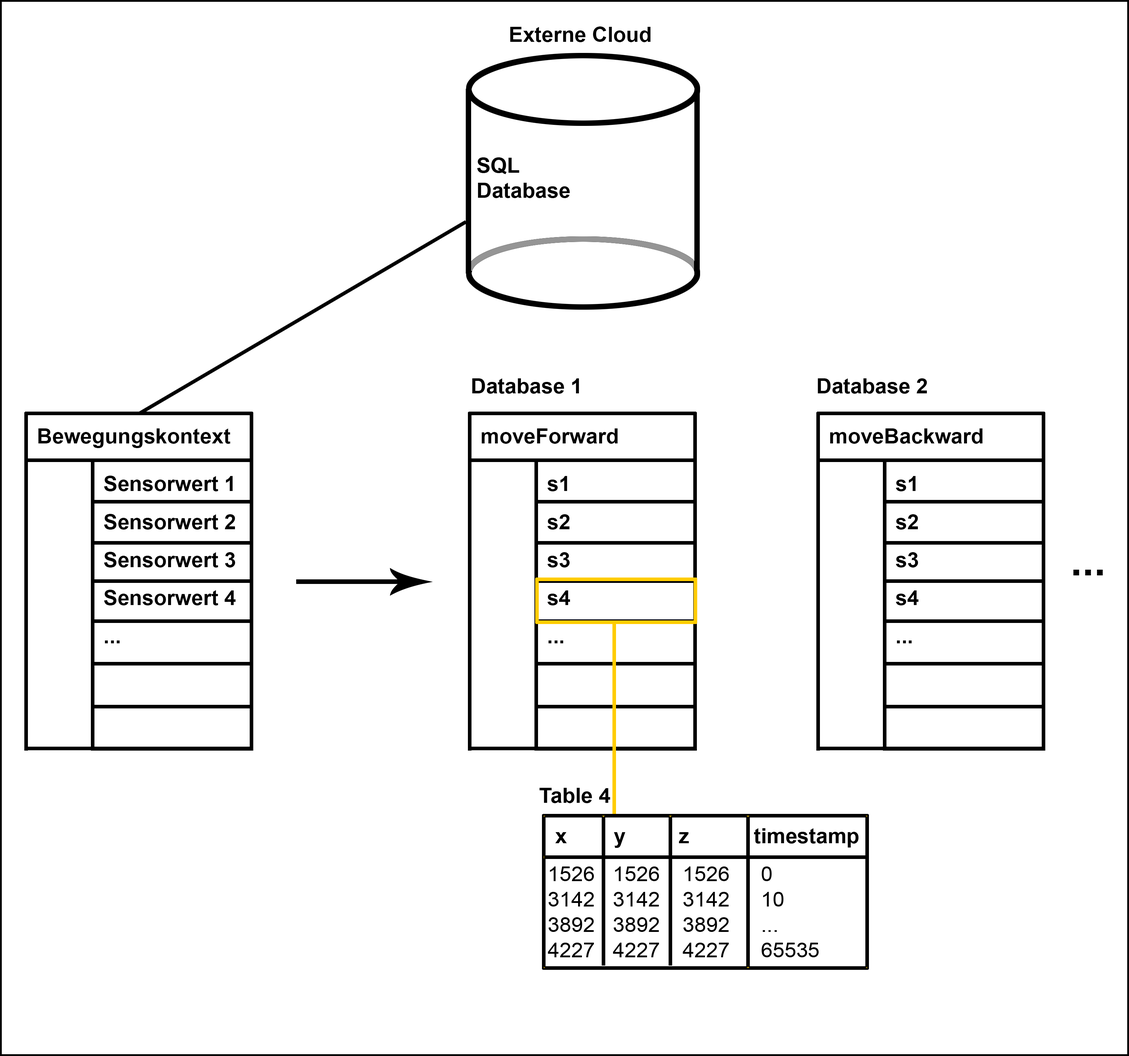
<style>
.page{position:relative;width:1129px;height:1056px;background:#ffffff}
.page>*{position:absolute;margin:0}
.t1{font:21.1px "Arial-BoldMT";color:#000000}
.t2{font:21.1px/38px "Arial-BoldMT";color:#000000}
.t3{font:42.2px "Arial-BoldMT";color:#000000}
.t4{font:21.1px "ArialMT";color:#000000}
</style>
<div class="page">
<p class="t1" style="left:510px;top:26px;width:141px;height:16px">Externe Cloud</p>
<p class="t1" style="left:477px;top:157px;width:93px;height:41px">SQL<br>Database</p>
<p class="t1" style="left:472px;top:378px;width:107px;height:16px">Database 1</p>
<p class="t1" style="left:818px;top:378px;width:109px;height:16px">Database 2</p>
<p class="t1" style="left:38px;top:429px;width:192px;height:19px">Bewegungskontext</p>
<p class="t1" style="left:481px;top:429px;width:137px;height:15px">moveForward</p>
<p class="t1" style="left:830px;top:429px;width:153px;height:15px">moveBackward</p>
<p class="t2" style="left:104px;top:476px;width:132px;height:167px">Sensorwert 1<br>Sensorwert 2<br>Sensorwert 3<br>Sensorwert 4<br>...</p>
<p class="t2" style="left:547px;top:476px;width:23px;height:167px">s1<br>s2<br>s3<br>s4<br>...</p>
<p class="t2" style="left:896px;top:476px;width:23px;height:167px">s1<br>s2<br>s3<br>s4<br>...</p>
<p class="t3" style="left:1073px;top:570px;width:30px;height:6px">...</p>
<p class="t1" style="left:539px;top:788px;width:71px;height:15px">Table 4</p>
<p class="t1" style="left:555px;top:828px;width:303px;height:20px">x        y         z           timestamp</p>
<p class="t4" style="left:548px;top:867px;width:46px;height:91px">1526<br>3142<br>3892<br>4227</p>
<p class="t4" style="left:613px;top:867px;width:46px;height:91px">1526<br>3142<br>3892<br>4227</p>
<p class="t4" style="left:682px;top:867px;width:47px;height:91px">1526<br>3142<br>3892<br>4227</p>
<p class="t4" style="left:762px;top:867px;width:57px;height:91px">0<br>10<br>...<br>65535</p>
</div>
